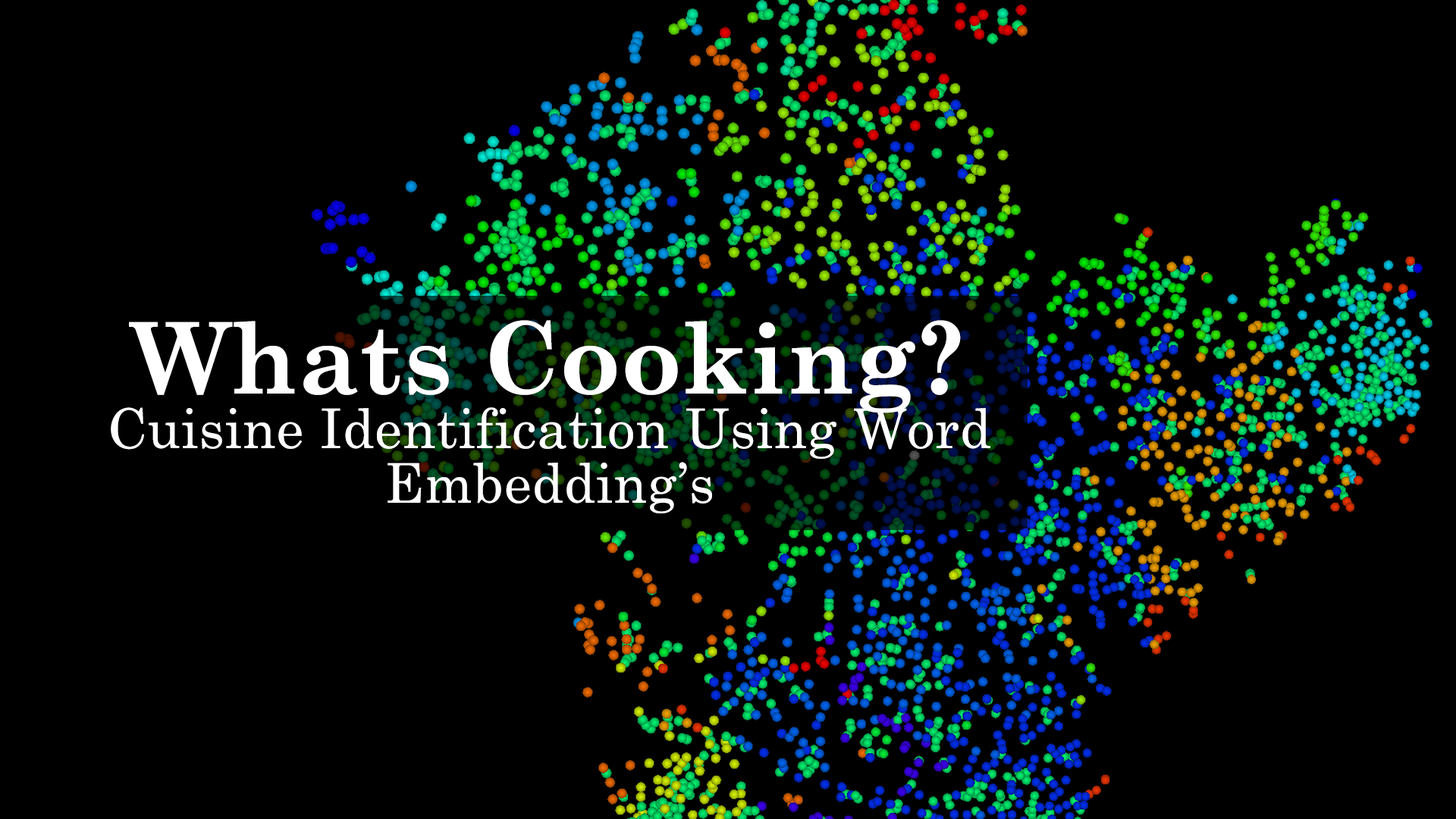
<style>
.page{position:relative;width:1456px;height:819px;background:#000000}
.page>*{position:absolute;margin:0}
.t1{font:54.6px/54.6px "CenturySchoolbook";letter-spacing:0.01em;color:#ffffff}
.t2{font:98.6px/54.6px "CenturySchoolbook-Bold";letter-spacing:0.01em;color:#ffffff}
</style>
<div class="page">
<p class="t1" style="left:111px;top:320px;width:879px;height:193px;text-align:center"><span class="t2">Whats Cooking? </span>Cuisine Identification Using Word Embedding’s</p>
</div>
